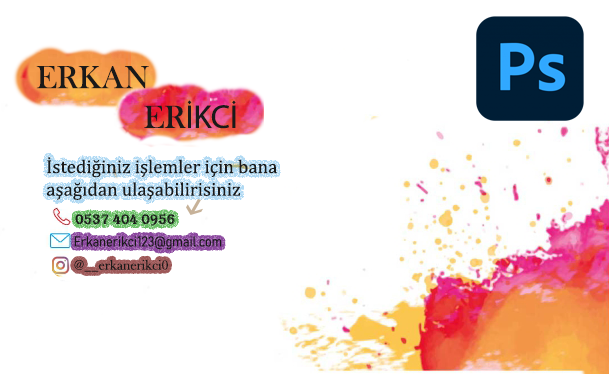
<style>
.page{position:relative;width:609px;height:375px;background:#ffffff}
.page>*{position:absolute;margin:0}
.t1{font:33.1px "BaskOldFace";color:#1a1a1a}
.t2{font:33.1px "MyriadPro-Regular";color:#1a1a1a}
.t3{font:18.9px "CambriaMath";color:#1a1a1a}
.t4{font:14.2px "Algerian";color:#1a1a1a}
.t5{font:14.2px "Bahnschrift-LightSemiCondensed";color:#1a1a1a}
.t6{font:14.2px "BaskOldFace";color:#1a1a1a}
</style>
<div class="page">
<p class="t1" style="left:36px;top:66px;width:200px;height:63px">ERKAN <br>             ER<span class="t2">İKCİ</span></p>
<p class="t3" style="left:46px;top:157px;width:231px;height:43px">İstediğiniz işlemler için bana<br>aşağıdan ulaşabilirisiniz</p>
<p class="t4" style="left:75px;top:213px;width:100px;height:13px">0537 404 0956</p>
<p class="t5" style="left:74px;top:236px;width:148px;height:14px">Erkanerikci123@gmail.com</p>
<p class="t6" style="left:74px;top:259px;width:94px;height:13px">@__erkanerikci0</p>
</div>
